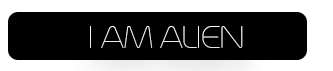
<style>
.page{position:relative;width:333px;height:71px;background:#000000}
.page>*{position:absolute;margin:0}
.t1{font:39.3px "Trench-Thin";letter-spacing:-0.05em;color:#000000;text-transform:uppercase}
</style>
<div class="page">
<p class="t1" style="left:90px;top:26px;width:153px;height:22px">I am ALIEN</p>
</div>
